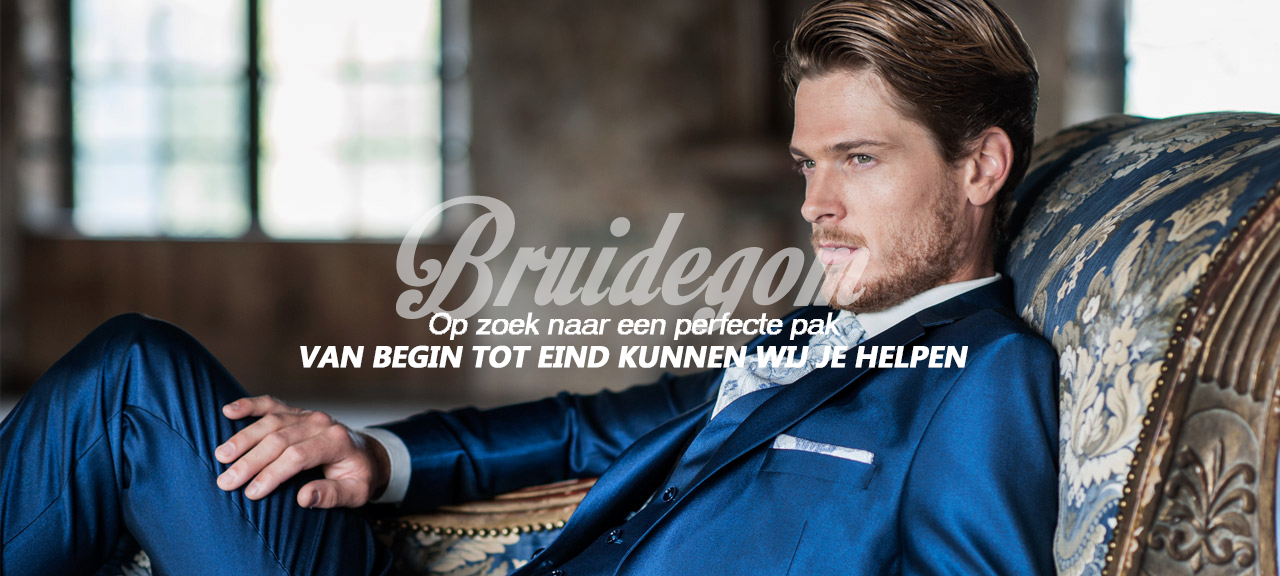
<style>
.page{position:relative;width:1280px;height:576px}
.page>*{position:absolute;margin:0}
.t1{font:30px "MS Sans Serif";color:#ffffff;font-weight:bold;font-style:italic}
.t2{font:30px "MicrosoftTaiLe-Bold";letter-spacing:-0.025em;color:#ffffff;text-transform:uppercase;font-weight:bold;font-style:italic}
</style>
<div class="page">
<p class="t1" style="left:429px;top:312px;width:411px;height:28px">Op zoek naar een perfecte pak</p>
<p class="t2" style="left:300px;top:345px;width:668px;height:23px">van begin tot eind kunnen wij je helpen</p>
</div>
